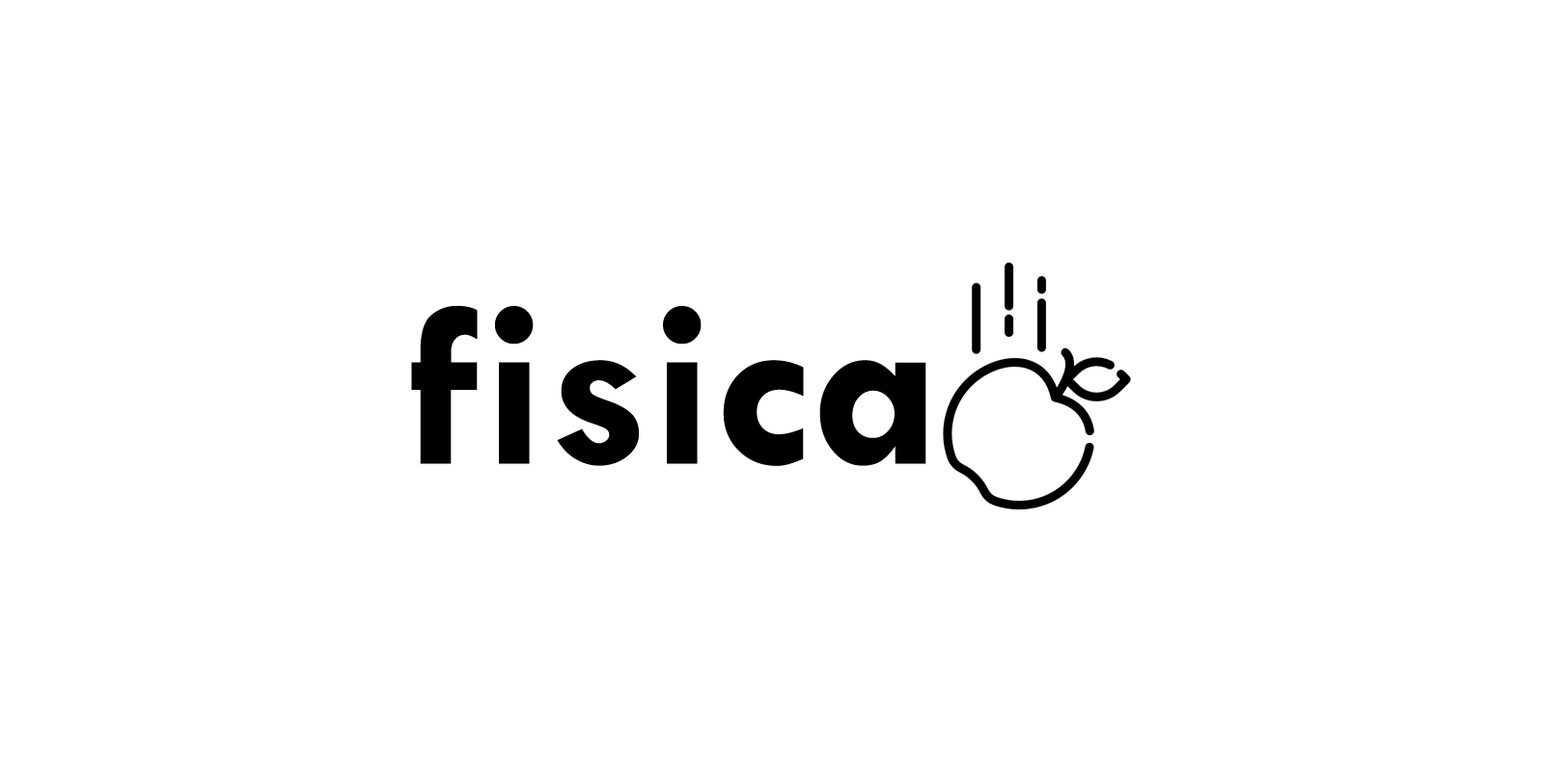
<style>
.page{position:relative;width:1544px;height:772px;background:#ffffff}
.page>*{position:absolute;margin:0}
.t1{font:241.3px "TwCenMT-Bold";letter-spacing:0.005em;color:#000000}
</style>
<div class="page">
<p class="t1" style="left:411px;top:306px;width:516px;height:160px">fisica</p>
</div>
